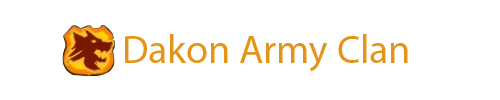
<style>
.page{position:relative;width:500px;height:100px;background:#ffffff}
.page>*{position:absolute;margin:0}
.t1{font:40px "MyriadPro-Regular";color:#e49519}
</style>
<div class="page">
<p class="t1" style="left:125px;top:34px;width:283px;height:38px">Dakon Army Clan</p>
</div>
